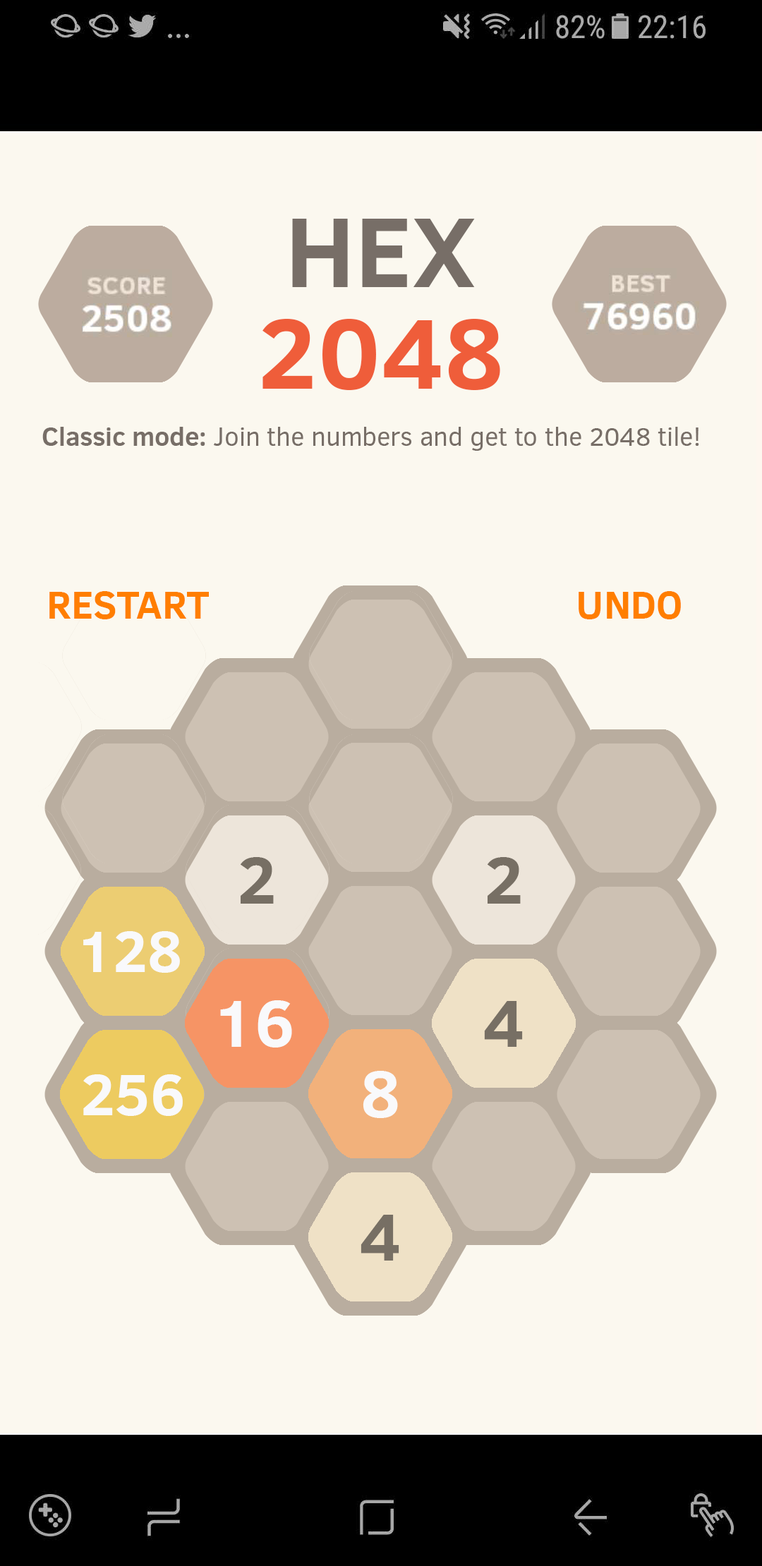
<style>
.page{position:relative;width:762px;height:1566px;background:#fbf8ef}
.page>*{position:absolute;margin:0}
.t1{font:101.6px/101.6px "ClearSans-Bold";color:#ef5d3a}
.t2{font:101.6px/101.6px "ClearSans-Bold";color:#776e67}
.t3{font:25.7px "ClearSans";color:#776e67}
.t4{font:25.7px "ClearSans-Bold";color:#776e67}
.t5{font:39.5px "ClearSans-Bold";color:#ff7e00}
.t6{font:67.7px "ClearSans-Bold";color:#776f64}
.t7{font:59.2px "ClearSans-Bold";color:#f9f9fb}
.t8{font:67.7px "ClearSans-Bold";color:#f9f9fb}
</style>
<div class="page">
<p class="t1" style="left:262px;top:219px;width:238px;height:171px;text-align:center"><span class="t2">HEX<br></span>2048</p>
<p class="t3" style="left:42px;top:427px;width:657px;height:24px"><span class="t4">Classic mode:</span> Join the numbers and get to the 2048 tile!</p>
<p class="t5" style="left:49px;top:591px;width:160px;height:28px">RESTART</p>
<p class="t5" style="left:578px;top:591px;width:103px;height:28px">UNDO</p>
<p class="t6" style="left:240px;top:857px;width:34px;height:46px">2</p>
<p class="t6" style="left:487px;top:857px;width:33px;height:46px">2</p>
<p class="t7" style="left:83px;top:931px;width:97px;height:42px">128</p>
<p class="t8" style="left:220px;top:1000px;width:72px;height:47px">16</p>
<p class="t6" style="left:484px;top:1001px;width:39px;height:46px">4</p>
<p class="t8" style="left:362px;top:1071px;width:36px;height:47px">8</p>
<p class="t7" style="left:83px;top:1074px;width:100px;height:42px">256</p>
<p class="t6" style="left:360px;top:1214px;width:39px;height:46px">4</p>
</div>
